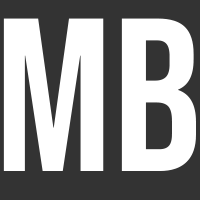
<style>
.page{position:relative;width:200px;height:200px;background:#333333}
.page>*{position:absolute;margin:0}
.t1{font:217.7px "BebasNeue-Regular";color:#ffffff;text-transform:uppercase}
</style>
<div class="page">
<p class="t1" style="left:3px;top:18px;width:193px;height:153px">mb</p>
</div>
